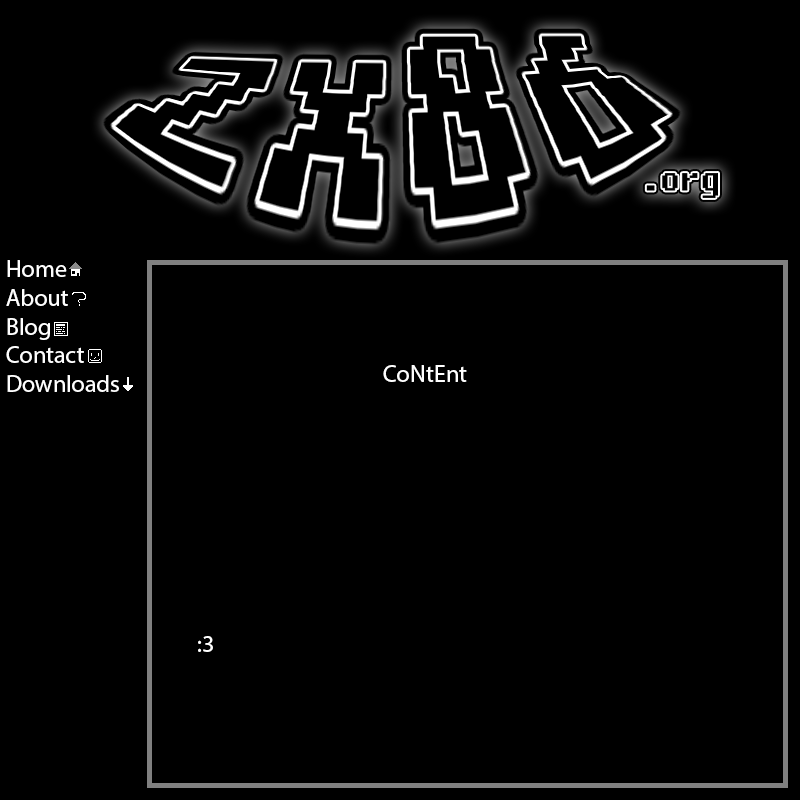
<style>
.page{position:relative;width:800px;height:800px;background:#000000}
.page>*{position:absolute;margin:0}
.t1{font:24px "MyriadPro-Regular";color:#ffffff}
</style>
<div class="page">
<p class="t1" style="left:6px;top:260px;width:113px;height:132px">Home<br>About<br>Blog<br>Contact<br>Downloads</p>
<p class="t1" style="left:383px;top:365px;width:84px;height:17px">CoNtEnt</p>
<p class="t1" style="left:198px;top:636px;width:15px;height:16px">:3</p>
</div>
